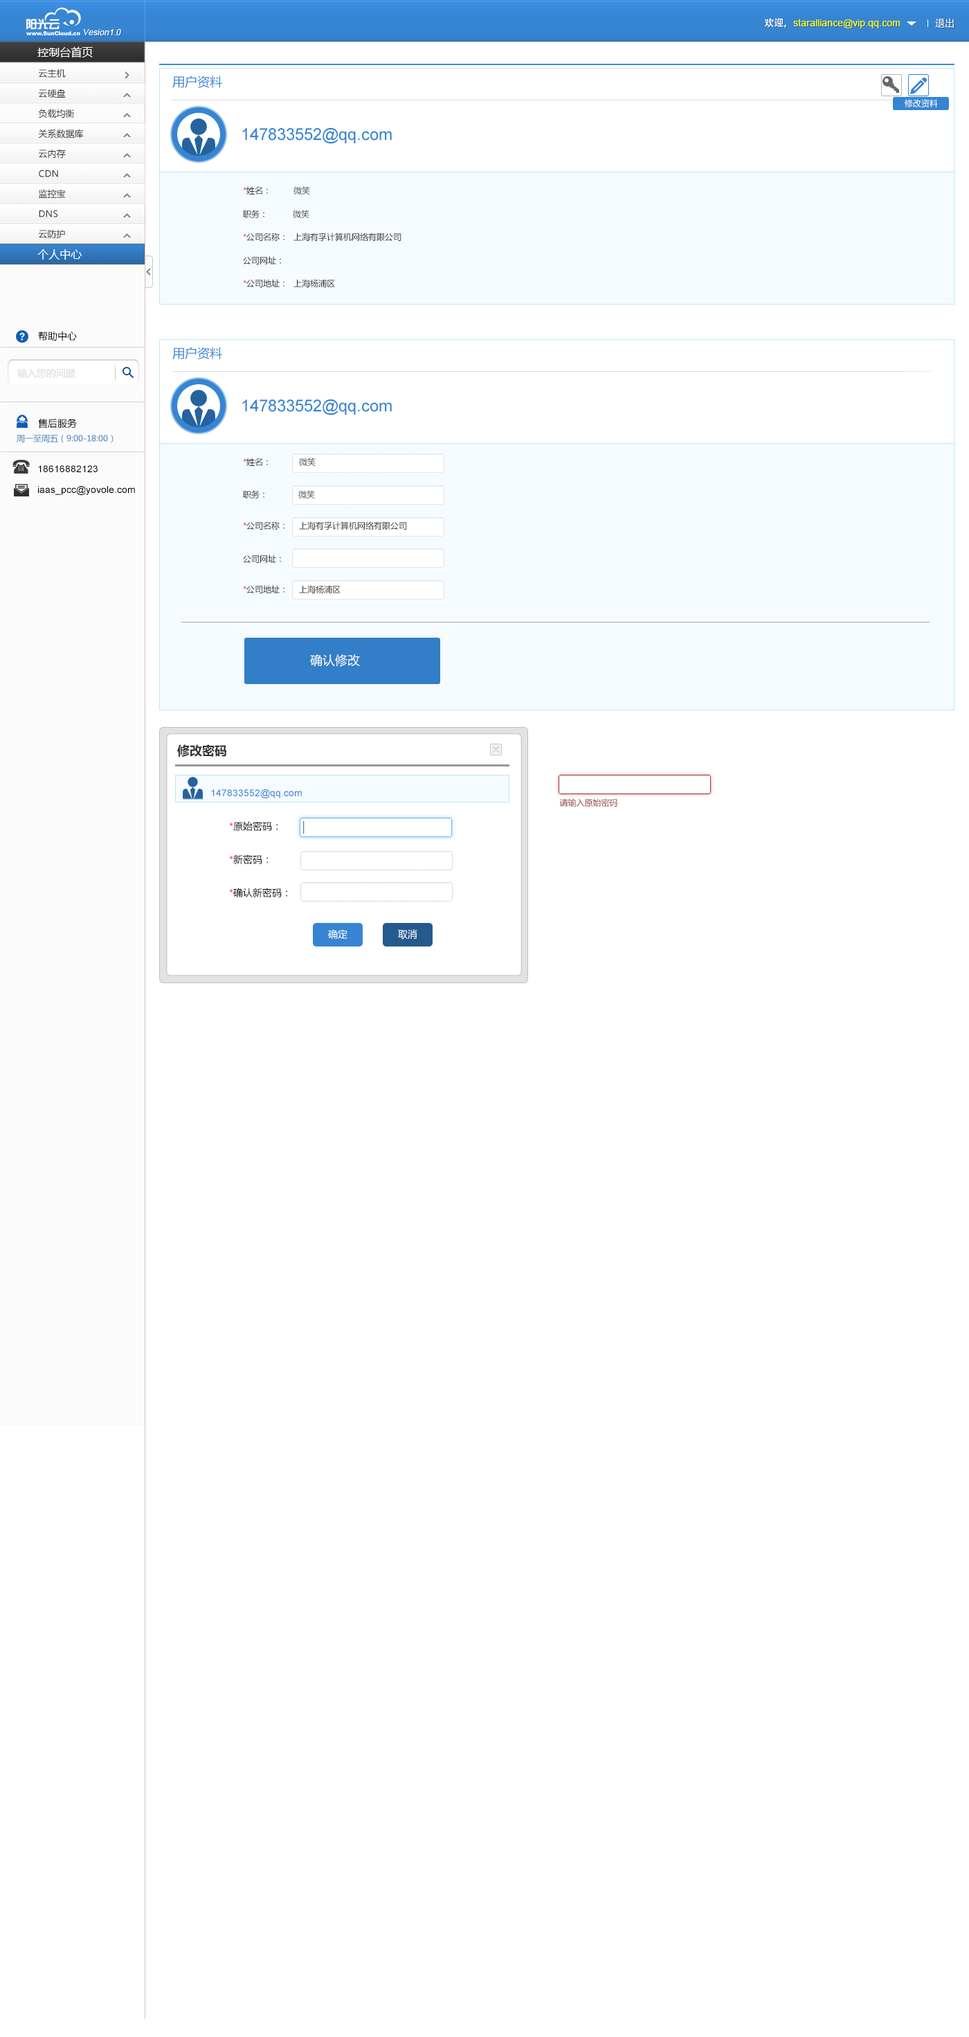
<style>
.page{position:relative;width:969px;height:2037px;background:#ffffff}
.page>*{position:absolute;margin:0}
.t1{font:8.3px "ArialMT";color:#ffffff;font-style:italic}
.t2{font:9.7px "ArialMT";color:#fcff0e}
.t3{font:9.7px "AdobeHeitiStd-Regular";color:#ffffff}
.t4{font:9.7px "MicrosoftYaHei";color:#ffffff}
.t5{font:11.1px "MicrosoftYaHei";color:#ffffff}
.t6{font:9px "MicrosoftYaHei";color:#333333}
.t7{font:12.5px "MicrosoftYaHei";color:#3685d3}
.t8{font:8.3px "MicrosoftYaHei";color:#ffffff}
.t9{font:16.6px "ArialMT";color:#3685d3}
.t10{font:8.3px "MicrosoftYaHei";color:#333333}
.t11{font:8.3px "MicrosoftYaHei";color:#ff0000}
.t12{font:9.7px "MicrosoftYaHei";color:#000000}
.t13{font:9.7px "MicrosoftYaHei";color:#d7d7d7}
.t14{font:8.3px "MicrosoftYaHei";color:#4182c3}
.t15{font:9.7px/6.9px "ArialMT";color:#000000}
.t16{font:12.5px "MicrosoftYaHei";color:#ffffff}
.t17{font:12.5px "MicrosoftYaHei-Bold";color:#333333}
.t18{font:9.7px "ArialMT";color:#3685d3}
.t19{font:8.3px "MicrosoftYaHei";color:#953b39}
.t20{font:9.7px/16.6px "MicrosoftYaHei";color:#000000}
.t21{font:9.7px/16.6px "MicrosoftYaHei";color:#ff0000}
</style>
<div class="page">
<p class="t1" style="left:84px;top:29px;width:37px;height:6px">Vesion1.0</p>
<p class="t2" style="left:765px;top:18px;width:136px;height:10px"><span class="t3">欢迎，</span>staralliance@vip.qq.com</p>
<p class="t4" style="left:935px;top:18px;width:19px;height:10px">退出</p>
<p class="t5" style="left:37px;top:46px;width:56px;height:12px">控制台首页</p>
<p class="t6" style="left:38px;top:69px;width:28px;height:9px">云主机</p>
<p class="t7" style="left:172px;top:75px;width:50px;height:13px">用户资料</p>
<p class="t6" style="left:38px;top:89px;width:28px;height:9px">云硬盘</p>
<p class="t8" style="left:905px;top:99px;width:33px;height:9px">修改资料</p>
<p class="t6" style="left:38px;top:109px;width:36px;height:9px">负载均衡</p>
<p class="t6" style="left:38px;top:129px;width:46px;height:9px">关系数据库</p>
<p class="t9" style="left:242px;top:127px;width:150px;height:17px">147833552@qq.com</p>
<p class="t6" style="left:38px;top:149px;width:28px;height:10px">云内存</p>
<p class="t6" style="left:39px;top:170px;width:19px;height:7px">CDN</p>
<p class="t6" style="left:38px;top:189px;width:28px;height:9px">监控宝</p>
<p class="t10" style="left:243px;top:186px;width:67px;height:9px"><span class="t11">*</span>姓名：        微笑</p>
<p class="t6" style="left:39px;top:210px;width:19px;height:7px">DNS</p>
<p class="t10" style="left:243px;top:210px;width:66px;height:9px">职务：         微笑</p>
<p class="t6" style="left:38px;top:229px;width:27px;height:10px">云防护</p>
<p class="t10" style="left:243px;top:233px;width:159px;height:9px"><span class="t11">*</span>公司名称：  上海有孚计算机网络有限公司</p>
<p class="t5" style="left:37px;top:249px;width:45px;height:11px">个人中心</p>
<p class="t10" style="left:243px;top:256px;width:38px;height:8px">公司网址：</p>
<p class="t10" style="left:243px;top:279px;width:92px;height:8px"><span class="t11">*</span>公司地址：  上海杨浦区</p>
<p class="t12" style="left:38px;top:331px;width:39px;height:10px">帮助中心</p>
<p class="t7" style="left:172px;top:347px;width:50px;height:12px">用户资料</p>
<p class="t13" style="left:17px;top:368px;width:58px;height:10px">输入您的问题</p>
<p class="t9" style="left:242px;top:399px;width:150px;height:16px">147833552@qq.com</p>
<p class="t12" style="left:38px;top:418px;width:39px;height:11px">售后服务</p>
<p class="t14" style="left:17px;top:435px;width:97px;height:8px">周一至周五（9:00-18:00）</p>
<p class="t10" style="left:243px;top:458px;width:73px;height:8px"><span class="t11">*</span>姓名：          微笑</p>
<p class="t15" style="left:38px;top:465px;width:97px;height:30px">18616882123   <br><br><br>iaas_pcc@yovole.com</p>
<p class="t10" style="left:243px;top:490px;width:72px;height:9px">职务：           微笑</p>
<p class="t10" style="left:243px;top:521px;width:164px;height:9px"><span class="t11">*</span>公司名称：    上海有孚计算机网络有限公司</p>
<p class="t10" style="left:243px;top:555px;width:38px;height:8px">公司网址：</p>
<p class="t10" style="left:243px;top:585px;width:98px;height:8px"><span class="t11">*</span>公司地址：    上海杨浦区</p>
<p class="t16" style="left:310px;top:654px;width:50px;height:13px">确认修改</p>
<p class="t17" style="left:177px;top:744px;width:49px;height:13px">修改密码</p>
<p class="t18" style="left:211px;top:789px;width:91px;height:9px">147833552@qq.com</p>
<p class="t19" style="left:559px;top:798px;width:59px;height:9px">请输入原始密码</p>
<p class="t20" style="left:229px;top:821px;width:58px;height:77px"><span class="t21">*</span>原始密码：<br><br><span class="t21">*</span>新密码：<br><br><span class="t21">*</span>确认新密码：</p>
<p class="t4" style="left:328px;top:929px;width:20px;height:10px">确定</p>
<p class="t4" style="left:398px;top:929px;width:19px;height:10px">取消</p>
</div>
